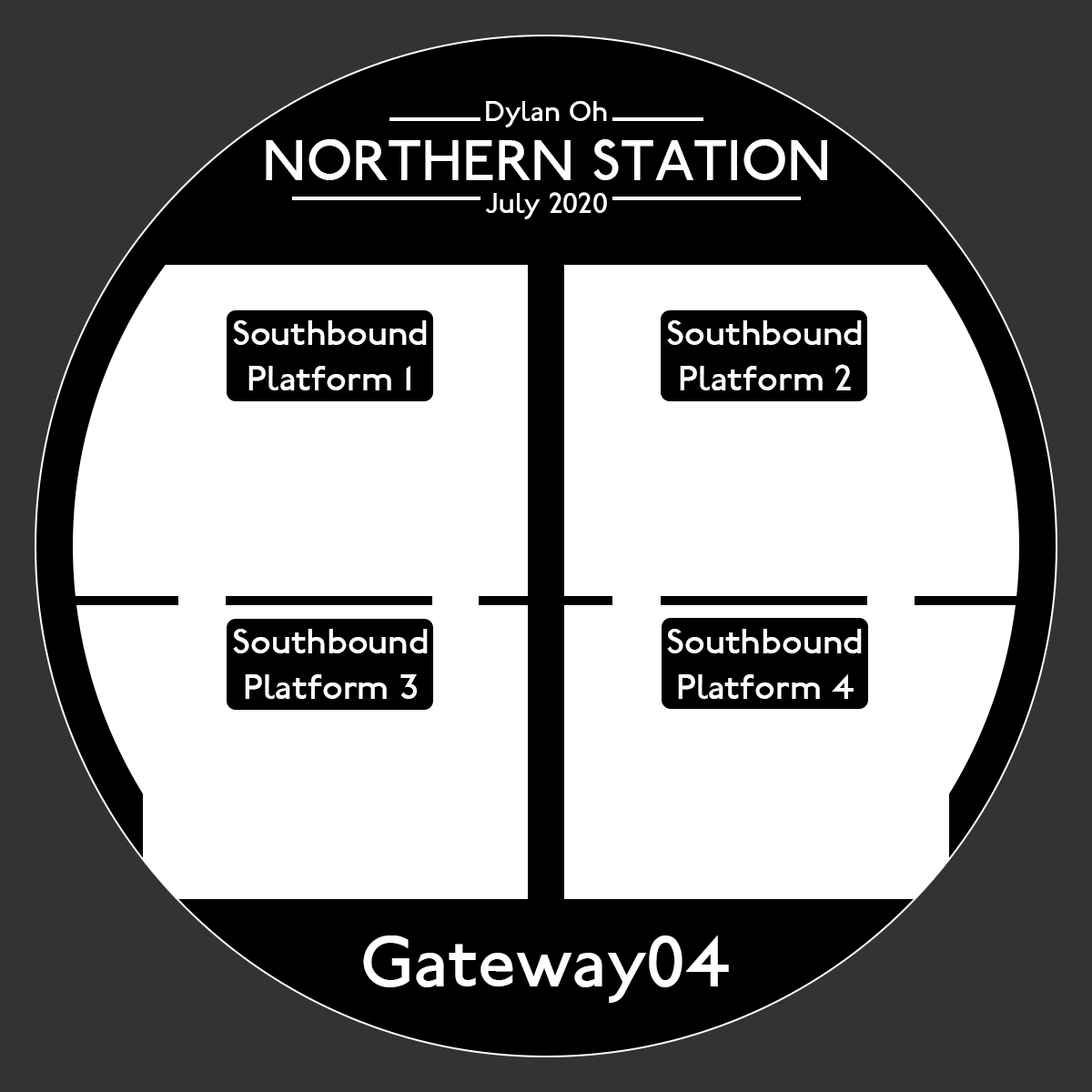
<style>
.page{position:relative;width:1092px;height:1092px;background:#ffffff}
.page>*{position:absolute;margin:0}
.t1{font:30.3px "P22JohnstonUnderground";color:#ffffff}
.t2{font:60.7px "P22JohnstonUnderground";color:#ffffff}
.t3{font:37.9px "P22JohnstonUnderground";color:#ffffff}
.t4{font:75.8px "P22JohnstonUnderground";color:#ffffff}
</style>
<div class="page">
<p class="t1" style="left:486px;top:101px;width:121px;height:26px">Dylan Oh</p>
<p class="t2" style="left:266px;top:139px;width:561px;height:41px">NORTHERN STATION</p>
<p class="t1" style="left:486px;top:192px;width:121px;height:27px">July 2020</p>
<p class="t3" style="left:233px;top:320px;width:194px;height:70px;text-align:center">Southbound<br>Platform 1</p>
<p class="t3" style="left:667px;top:320px;width:195px;height:70px;text-align:center">Southbound<br>Platform 2</p>
<p class="t3" style="left:233px;top:629px;width:195px;height:70px;text-align:center">Southbound<br>Platform 3</p>
<p class="t3" style="left:667px;top:629px;width:195px;height:70px;text-align:center">Southbound<br>Platform 4</p>
<p class="t4" style="left:363px;top:935px;width:366px;height:68px">Gateway04</p>
</div>
